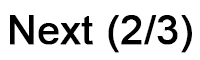
<style>
.page{position:relative;width:200px;height:60px;background:#ffffff}
.page>*{position:absolute;margin:0}
.t1{font:40px "ArialMT";color:#000000;font-weight:bold}
</style>
<div class="page">
<p class="t1" style="left:10px;top:15px;width:182px;height:38px">Next (2/3)</p>
</div>
